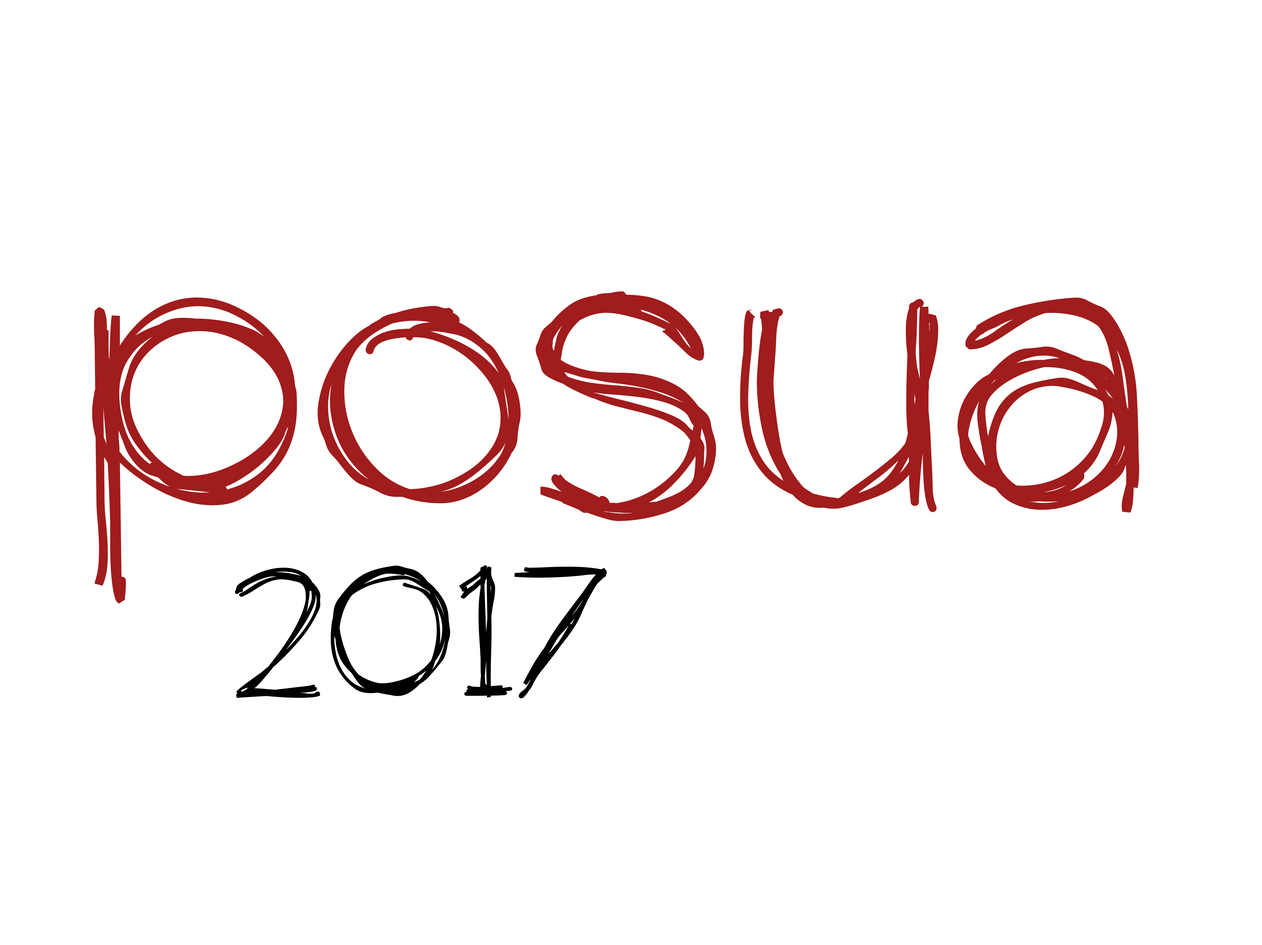
<style>
.page{position:relative;width:1262px;height:945px;background:#ffffff}
.page>*{position:absolute;margin:0}
.t1{font:403.8px "theunseen";letter-spacing:0.025em;color:#a11c1c}
.t2{font:187.4px "theunseen";letter-spacing:0.025em;color:#000000}
</style>
<div class="page">
<p class="t1" style="left:92px;top:291px;width:1048px;height:312px">posua</p>
<p class="t2" style="left:235px;top:565px;width:372px;height:133px">2017</p>
</div>
